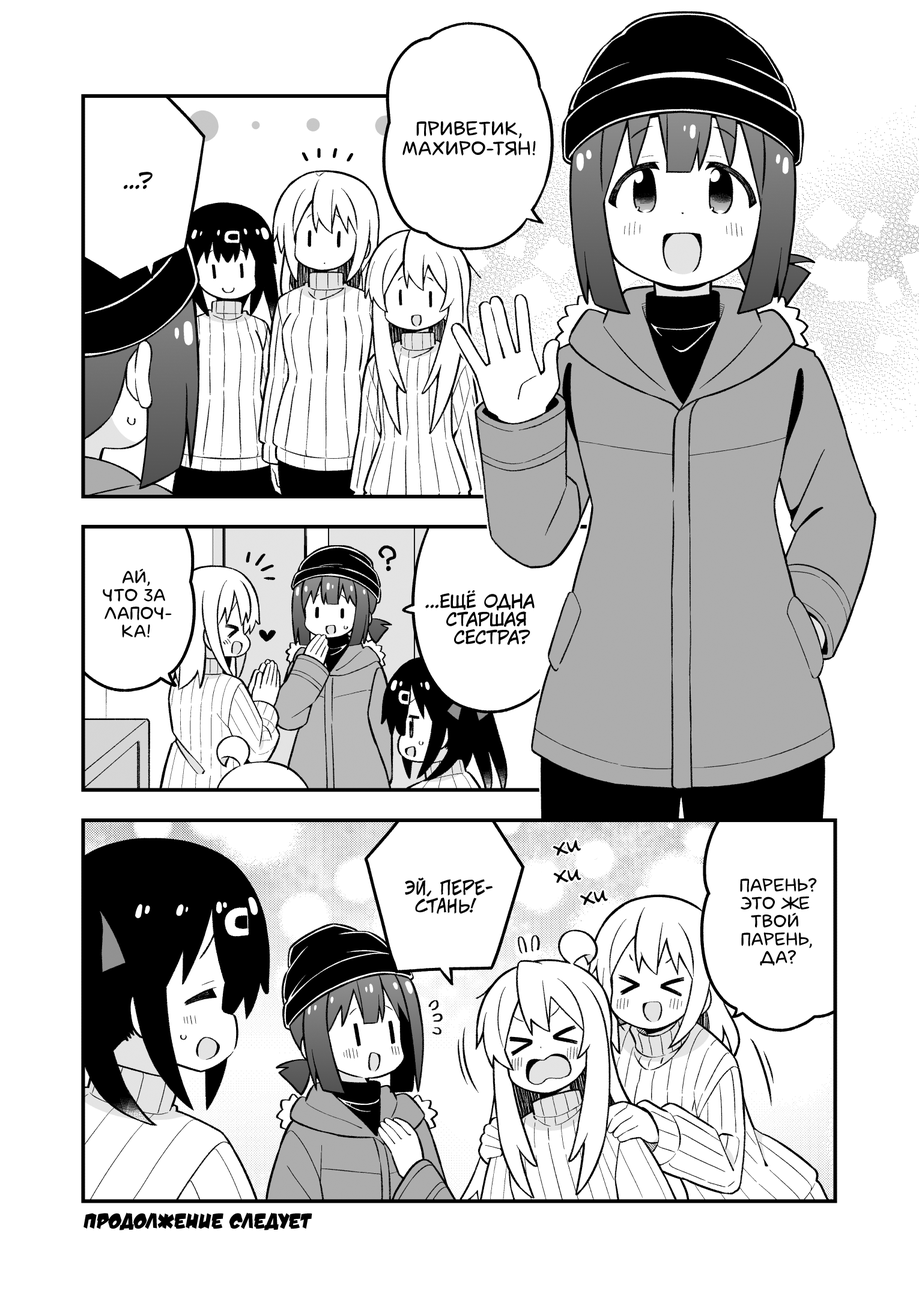
<style>
.page{position:relative;width:919px;height:1297px;background:#ffffff}
.page>*{position:absolute;margin:0}
.t1{font:19.8px "laCartoonerie";color:#000000;text-transform:uppercase}
.t2{font:21.6px "KuraiVoice2";color:#000000;text-transform:uppercase}
.t3{font:18px "laCartoonerie";color:#000000;text-transform:uppercase}
.t4{font:18px "KuraiVoice2";color:#000000;text-transform:uppercase}
.t5{font:25.2px "v_Augie";color:#000000}
.t6{font:18px "v_CCJeffCampbell";color:#000000;text-transform:uppercase}
.t7{font:21.6px "v_DamnNoisyKids";color:#000000;text-transform:uppercase}
</style>
<div class="page">
<p class="t1" style="left:402px;top:121px;width:134px;height:35px;text-align:center">Приветик,<br>Махиро-тян!</p>
<p class="t2" style="left:124px;top:172px;width:29px;height:17px">...?</p>
<p class="t3" style="left:103px;top:569px;width:69px;height:69px;text-align:center">Ай,<br>что за<br>лапоч-<br>ка!</p>
<p class="t4" style="left:425px;top:590px;width:110px;height:55px;text-align:center">...Ещё одна<br>старшая<br>сестра?</p>
<p class="t5" style="left:553px;top:840px;width:28px;height:16px;rotate:-12deg">хи</p>
<p class="t5" style="left:553px;top:869px;width:28px;height:15px;rotate:-7deg">хи</p>
<p class="t6" style="left:405px;top:878px;width:88px;height:36px;text-align:center">Эй, пере-<br>стань!</p>
<p class="t3" style="left:740px;top:878px;width:77px;height:88px;text-align:center">Парень?<br>Это же<br>твой<br>парень,<br>да?</p>
<p class="t5" style="left:580px;top:890px;width:28px;height:16px;rotate:-10deg">хи</p>
<p class="t7" style="left:83px;top:1213px;width:229px;height:18px">Продолжение следует</p>
</div>
